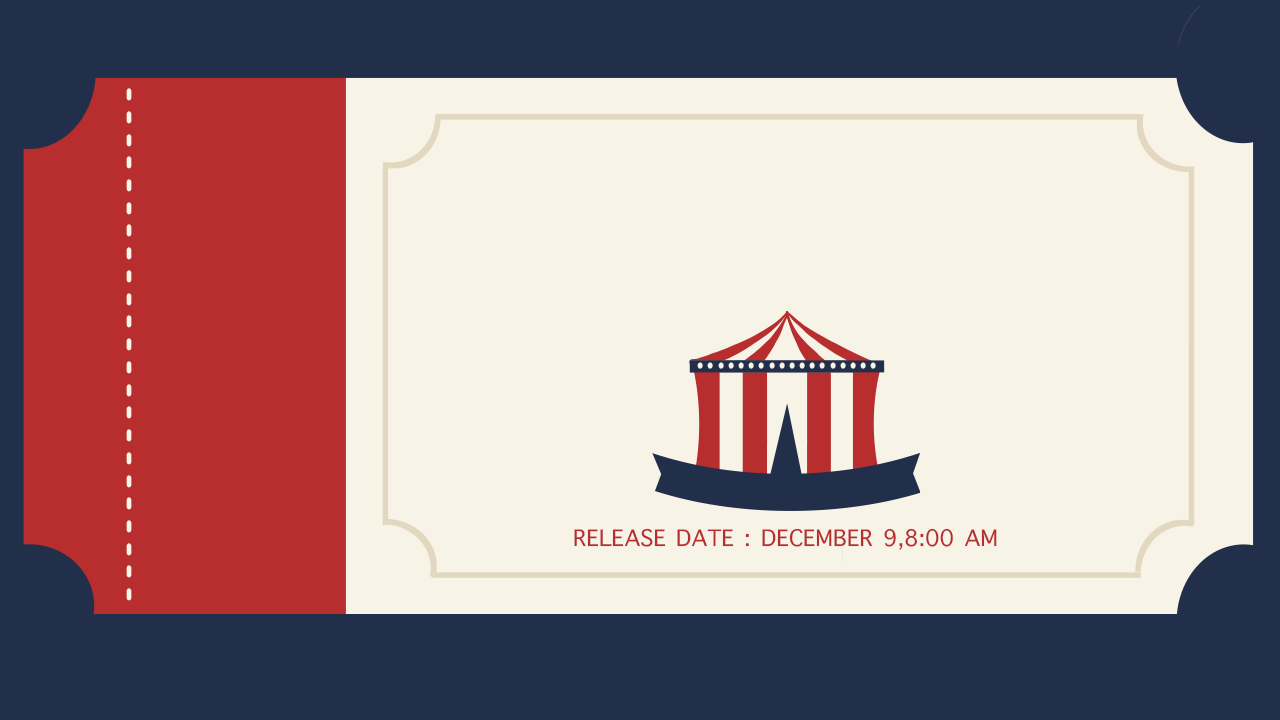
<style>
.page{position:relative;width:1280px;height:720px;background:#f8f3e7}
.page>*{position:absolute;margin:0}
.t1{font:39px "ArialRoundedMTBold";color:#f8f3e7}
.t2{font:47.6px "AmericanTypewriter-Condensed";color:#f8f3e7}
.t3{font:30.8px "AppleSymbols";color:#b82e2f}
</style>
<div class="page">
<p class="t1" style="left:126px;top:88px;width:6px;height:513px;rotate:-90deg">- - - - - - - - - - - - - - - - - - - - - - -</p>
<p class="t2" style="left:697px;top:362px;width:179px;height:7px">..................</p>
<p class="t3" style="left:574px;top:528px;width:423px;height:22px">RELEASE DATE : DECEMBER 9,8:00 AM</p>
</div>
